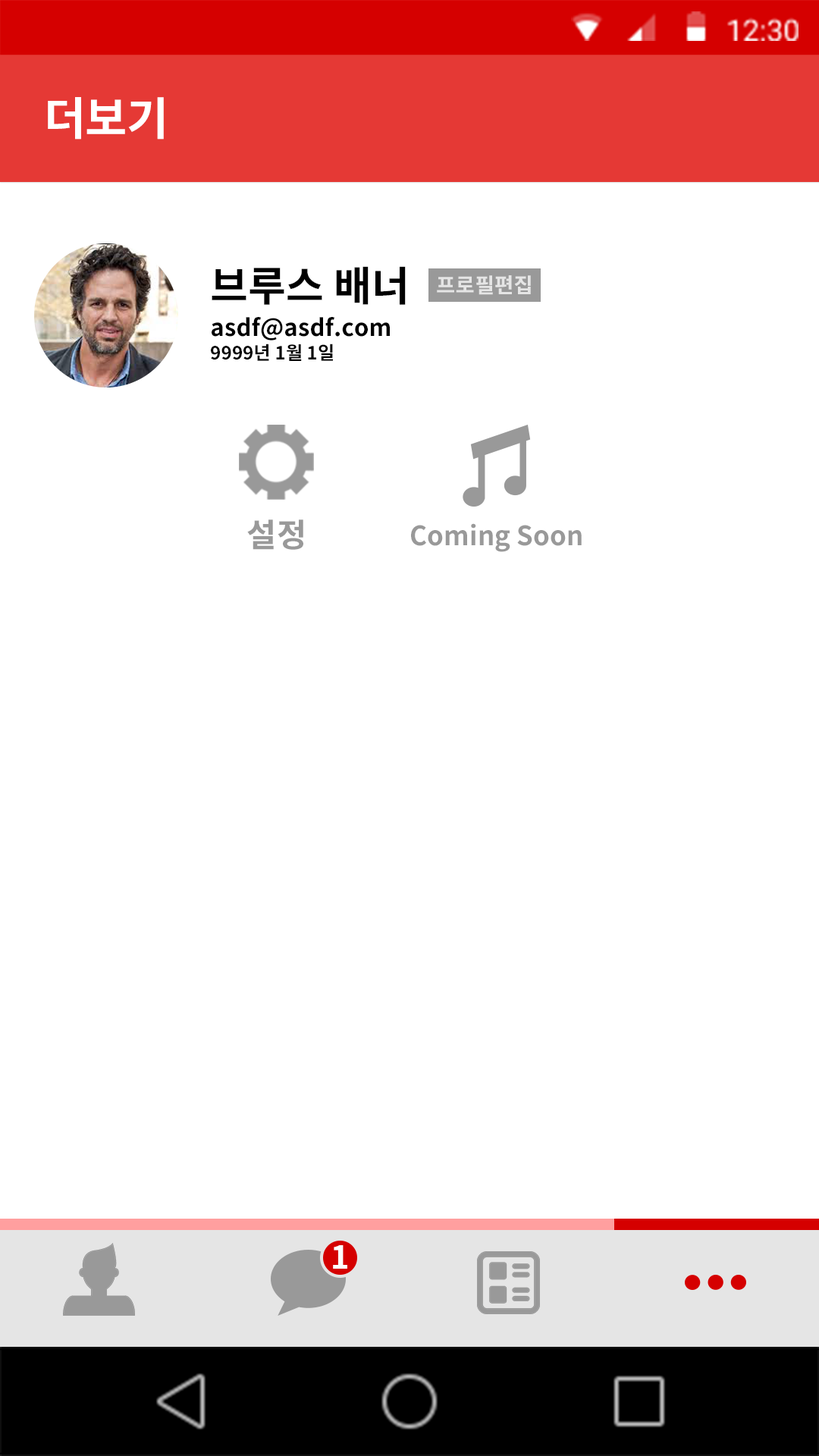
<style>
.page{position:relative;width:819px;height:1456px;background:#ffffff}
.page>*{position:absolute;margin:0}
.t1{font:45.2px "NotoSansCJKkr-Bold";letter-spacing:0.005em;color:#ffffff}
.t2{font:41.1px "NotoSansCJKkr-Bold";letter-spacing:0.005em;color:#000000}
.t3{font:20.8px "NotoSansCJKkr-Bold";letter-spacing:0.005em;color:#e5e5e5}
.t4{font:23.5px "NotoSansCJKkr-Bold";letter-spacing:0.005em;color:#000000}
.t5{font:18.3px "NotoSansCJKkr-Bold";letter-spacing:0.005em;color:#000000}
.t6{font:32.6px "NotoSansCJKkr-Bold";letter-spacing:0.005em;color:#999999}
.t7{font:26.6px "NotoSansCJKkr-Bold";letter-spacing:0.005em;color:#999999}
.t8{font:31.8px "NotoSansCJKkr-Bold";color:#ffffff}
</style>
<div class="page">
<p class="t1" style="left:48px;top:97px;width:116px;height:43px">더보기</p>
<p class="t2" style="left:212px;top:266px;width:194px;height:39px">브루스 배너</p>
<p class="t3" style="left:437px;top:275px;width:94px;height:20px">프로필편집</p>
<p class="t4" style="left:212px;top:317px;width:178px;height:23px">asdf@asdf.com</p>
<p class="t5" style="left:211px;top:344px;width:122px;height:17px">9999년 1월 1일</p>
<p class="t6" style="left:247px;top:519px;width:56px;height:31px">설정</p>
<p class="t7" style="left:411px;top:523px;width:171px;height:29px">Coming Soon</p>
<p class="t8" style="left:333px;top:1245px;width:14px;height:24px">1</p>
</div>
